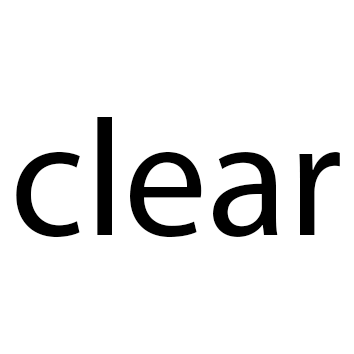
<style>
.page{position:relative;width:354px;height:354px;background:#ffffff}
.page>*{position:absolute;margin:0}
.t1{font:166.7px "MyriadPro-Regular";color:#000000}
</style>
<div class="page">
<p class="t1" style="left:16px;top:117px;width:324px;height:121px">clear</p>
</div>
